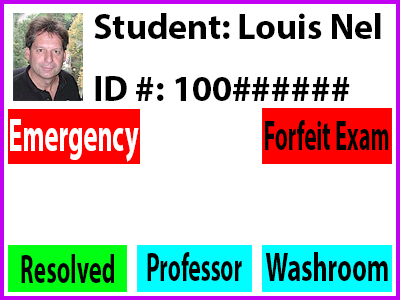
<style>
.page{position:relative;width:400px;height:300px;background:#ffffff}
.page>*{position:absolute;margin:0}
.t1{font:36px "MyriadPro-Bold";color:#000000}
.t2{font:47.1px "MyriadPro-Bold";color:#ffffff;scale:0.56 1}
.t3{font:41.6px "MyriadPro-Bold";color:#000000;scale:0.54 1}
.t4{font:40.3px "MyriadPro-Bold";color:#000000;scale:0.59 1}
.t5{font:40.3px "MyriadPro-Bold";color:#000000;scale:0.57 1}
.t6{font:40.3px "MyriadPro-Bold";color:#000000;scale:0.64 1}
</style>
<div class="page">
<p class="t1" style="left:94px;top:13px;width:287px;height:26px">Student: Louis Nel</p>
<p class="t1" style="left:95px;top:76px;width:255px;height:25px">ID #: 100######</p>
<p class="t2" style="left:10px;top:119px;width:129px;height:43px">Emergency</p>
<p class="t3" style="left:265px;top:120px;width:124px;height:30px">Forfeit Exam</p>
<p class="t4" style="left:21px;top:254px;width:93px;height:29px">Resolved</p>
<p class="t5" style="left:147px;top:252px;width:95px;height:29px">Professor</p>
<p class="t6" style="left:265px;top:252px;width:123px;height:29px">Washroom</p>
</div>
